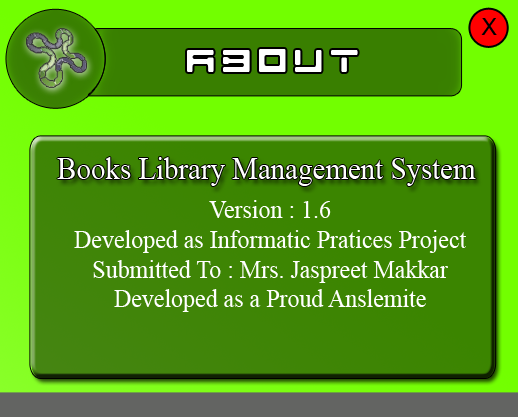
<style>
.page{position:relative;width:518px;height:417px}
.page>*{position:absolute;margin:0}
.t1{font:32px "Utsaah";color:#000000}
.t2{font:32px "Teio";color:#ffffff}
.t3{font:32px "TimesNewRomanPSMT";color:#ffffff;scale:0.9 1}
.t4{font:24.8px "TimesNewRomanPSMT";color:#ffffff;scale:0.97 1}
</style>
<div class="page">
<p class="t1" style="left:481px;top:18px;width:16px;height:17px">X</p>
<p class="t2" style="left:187px;top:49px;width:171px;height:23px">A B o u t</p>
<p class="t3" style="left:57px;top:157px;width:419px;height:29px">Books Library Management System</p>
<p class="t4" style="left:74px;top:200px;width:392px;height:112px;text-align:center">Version : 1.6<br>Developed as Informatic Pratices Project<br>Submitted To : Mrs. Jaspreet Makkar<br>Developed as a Proud Anslemite</p>
</div>
